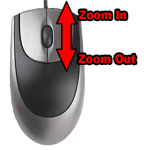
<style>
.page{position:relative;width:151px;height:150px;background:#ffffff}
.page>*{position:absolute;margin:0}
.t1{font:12px "Arial-Black";color:#ff0000;scale:0.9 1}
</style>
<div class="page">
<p class="t1" style="left:79px;top:10px;width:48px;height:10px">Zoom In</p>
<p class="t1" style="left:78px;top:54px;width:58px;height:10px">Zoom Out</p>
</div>
